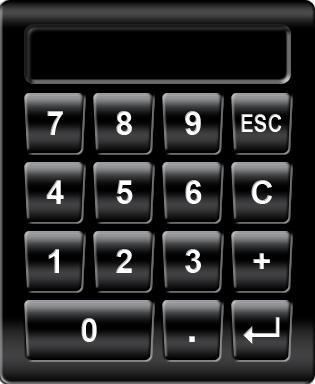
<style>
.page{position:relative;width:315px;height:384px;background:#000000}
.page>*{position:absolute;margin:0}
.t1{font:33.3px "Arial-BoldMT";color:#ffffff}
.t2{font:25px "ArialNarrow-Bold";color:#ffffff}
.t3{font:41.7px "Arial-BoldMT";color:#ffffff}
</style>
<div class="page">
<p class="t1" style="left:47px;top:111px;width:16px;height:24px">7</p>
<p class="t1" style="left:116px;top:111px;width:16px;height:24px">8</p>
<p class="t1" style="left:185px;top:111px;width:16px;height:24px">9</p>
<p class="t2" style="left:241px;top:114px;width:41px;height:18px">ESC</p>
<p class="t1" style="left:46px;top:180px;width:18px;height:24px">4</p>
<p class="t1" style="left:116px;top:180px;width:17px;height:24px">5</p>
<p class="t1" style="left:185px;top:180px;width:17px;height:24px">6</p>
<p class="t1" style="left:251px;top:180px;width:22px;height:24px">C</p>
<p class="t1" style="left:48px;top:249px;width:11px;height:24px">1</p>
<p class="t1" style="left:116px;top:249px;width:16px;height:24px">2</p>
<p class="t1" style="left:185px;top:249px;width:16px;height:24px">3</p>
<p class="t1" style="left:253px;top:253px;width:17px;height:16px">+</p>
<p class="t1" style="left:81px;top:318px;width:16px;height:24px">0</p>
<p class="t3" style="left:189px;top:336px;width:6px;height:6px">.</p>
</div>
